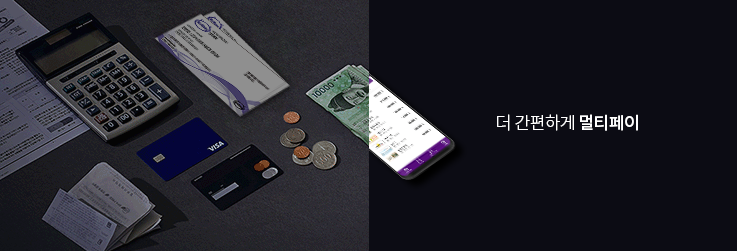
<style>
.page{position:relative;width:737px;height:251px;background:#0c0c14}
.page>*{position:absolute;margin:0}
.t1{font:17px "NotoSansKR-Light";letter-spacing:-0.025em;color:#ffffff}
.t2{font:17px "NotoSansKR-Medium";letter-spacing:-0.025em;color:#ffffff}
</style>
<div class="page">
<p class="t1" style="left:497px;top:114px;width:141px;height:17px">더 간편하게 <span class="t2">멀티페이</span></p>
</div>
